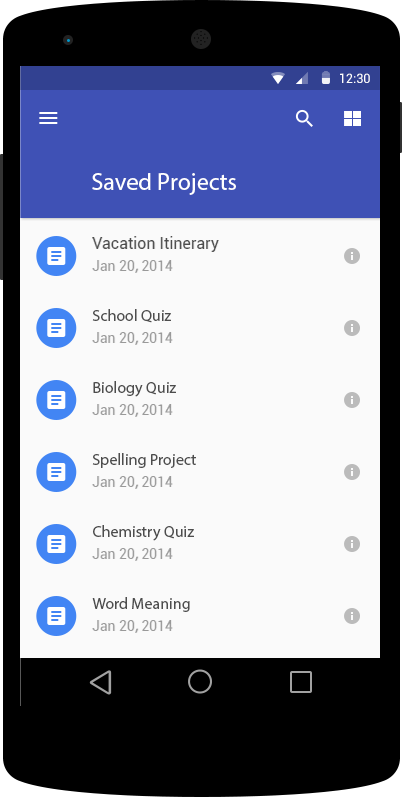
<style>
.page{position:relative;width:402px;height:797px;background:#fafafa}
.page>*{position:absolute;margin:0}
.t1{font:12.7px "Roboto-Regular";color:#ffffff}
.t2{font:24px "Roboto-Regular";color:#ffffff}
.t3{font:16px "Roboto-Regular";color:#4d4d4d}
.t4{font:14px "Roboto-Regular";color:#999999}
.t5{font:14px "AdobeHeitiStd-Regular";color:#999999}
</style>
<div class="page">
<p class="t1" style="left:340px;top:73px;width:30px;height:10px">12:30</p>
<p class="t2" style="left:92px;top:173px;width:144px;height:22px">Saved Projects</p>
<p class="t3" style="left:92px;top:236px;width:127px;height:16px">Vacation Itinerary</p>
<p class="t4" style="left:92px;top:260px;width:81px;height:13px">Jan 20<span class="t5">, </span>2014</p>
<p class="t3" style="left:92px;top:309px;width:79px;height:14px">School Quiz</p>
<p class="t4" style="left:92px;top:332px;width:81px;height:13px">Jan 20<span class="t5">, </span>2014</p>
<p class="t3" style="left:93px;top:381px;width:83px;height:16px">Biology Quiz</p>
<p class="t4" style="left:92px;top:404px;width:81px;height:13px">Jan 20<span class="t5">, </span>2014</p>
<p class="t3" style="left:92px;top:453px;width:104px;height:15px">Spelling Project</p>
<p class="t4" style="left:92px;top:476px;width:81px;height:13px">Jan 20<span class="t5">, </span>2014</p>
<p class="t3" style="left:93px;top:525px;width:101px;height:16px">Chemistry Quiz</p>
<p class="t4" style="left:92px;top:548px;width:81px;height:13px">Jan 20<span class="t5">, </span>2014</p>
<p class="t3" style="left:92px;top:597px;width:98px;height:15px">Word Meaning</p>
<p class="t4" style="left:92px;top:620px;width:81px;height:13px">Jan 20<span class="t5">, </span>2014</p>
</div>
